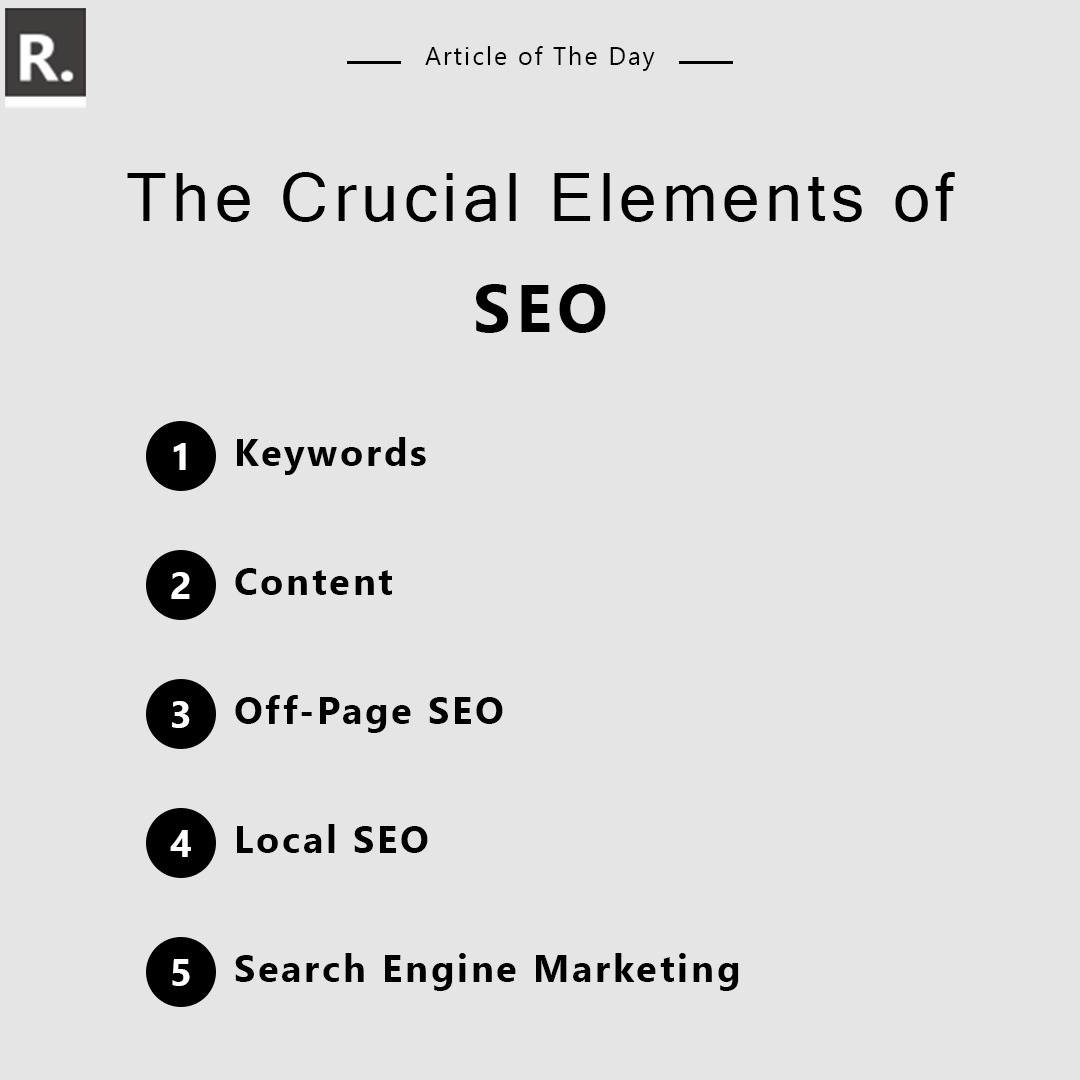
<style>
.page{position:relative;width:1080px;height:1080px;background:#e5e5e5}
.page>*{position:absolute;margin:0}
.t1{font:25px "SegoeUI";letter-spacing:0.08em;color:#000000}
.t2{font:66.7px/110.7px "MicrosoftSansSerif";letter-spacing:0.08em;color:#000000}
.t3{font:66.7px/110.7px "SegoeUI-Bold";letter-spacing:0.08em;color:#000000}
.t4{font:37.5px "SegoeUI-Bold";letter-spacing:0.08em;color:#000000}
.t5{font:37.5px "SegoeUI-Bold";letter-spacing:0.08em;color:#ffffff}
</style>
<div class="page">
<p class="t1" style="left:425px;top:46px;width:230px;height:25px">Article of The Day</p>
<p class="t2" style="left:127px;top:172px;width:828px;height:161px;text-align:center">The Crucial Elements of <span class="t3">SEO</span></p>
<p class="t4" style="left:237px;top:437px;width:189px;height:38px">Keywords</p>
<p class="t5" style="left:173px;top:443px;width:13px;height:27px">1</p>
<p class="t4" style="left:235px;top:568px;width:157px;height:27px">Content</p>
<p class="t5" style="left:171px;top:572px;width:19px;height:27px">2</p>
<p class="t5" style="left:172px;top:701px;width:18px;height:27px">3</p>
<p class="t4" style="left:235px;top:695px;width:268px;height:38px">Off-Page SEO</p>
<p class="t5" style="left:170px;top:830px;width:21px;height:27px">4</p>
<p class="t4" style="left:237px;top:824px;width:191px;height:29px">Local SEO</p>
<p class="t4" style="left:235px;top:953px;width:504px;height:38px">Search Engine Marketing</p>
<p class="t5" style="left:172px;top:959px;width:18px;height:27px">5</p>
</div>
